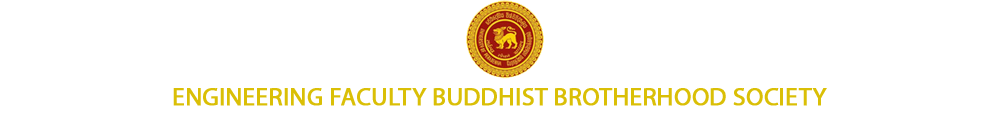
<style>
.page{position:relative;width:1000px;height:120px;background:#ffffff}
.page>*{position:absolute;margin:0}
.t1{font:25px "MyriadPro-Regular";color:#dabf06;font-weight:bold}
</style>
<div class="page">
<p class="t1" style="left:173px;top:88px;width:654px;height:18px">ENGINEERING FACULTY BUDDHIST BROTHERHOOD SOCIETY</p>
</div>
